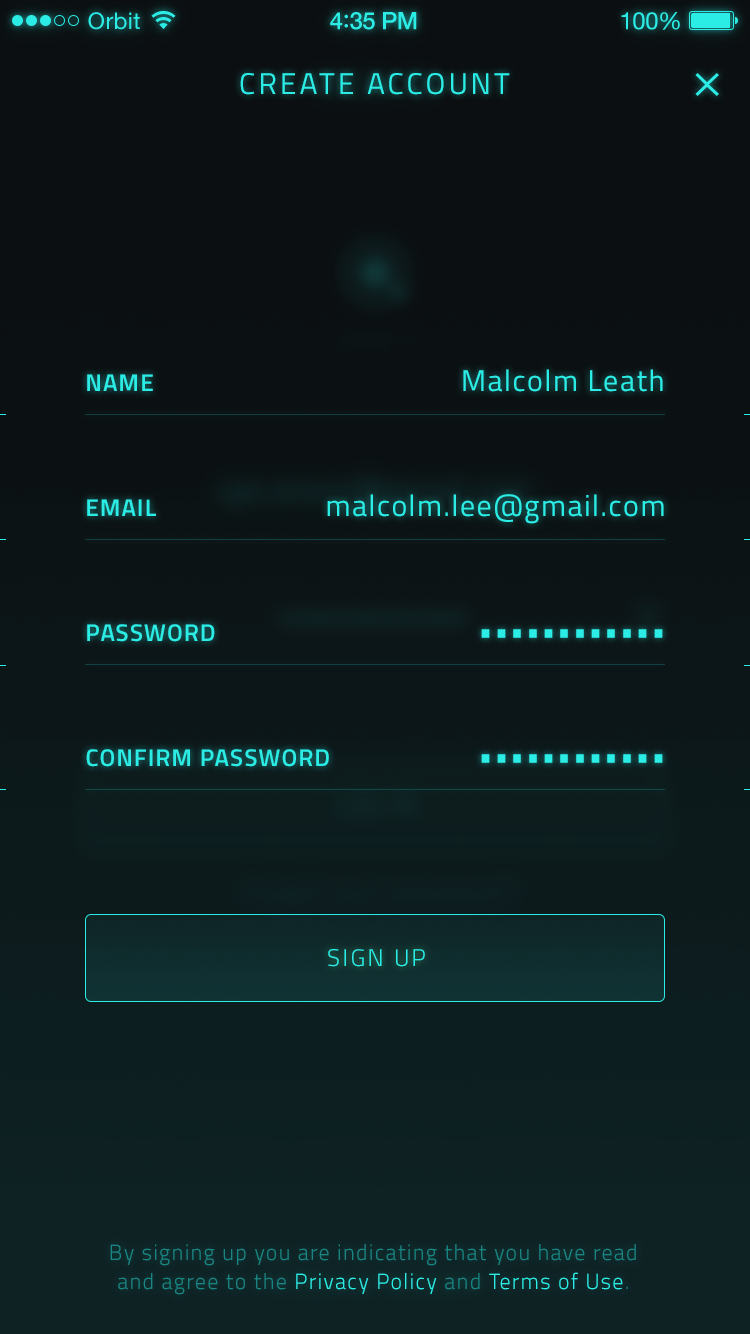
<style>
.page{position:relative;width:750px;height:1334px;background:#0b0f11}
.page>*{position:absolute;margin:0}
.t1{font:23px "HelveticaNeue";letter-spacing:0.02em;color:#2bede6}
.t2{font:24px "HelveticaNeue-Medium";letter-spacing:-0.02em;color:#2bede6}
.t3{font:26px "Avenir-Medium";letter-spacing:-0.02em;color:#2bede6}
.t4{font:24px "HelveticaNeue";letter-spacing:-0.02em;color:#2bede6}
.t5{font:30px "Titillium-Regular";letter-spacing:0.1em;color:#2bede6;text-transform:uppercase}
.t6{font:24px "Titillium-Semibold";letter-spacing:0.05em;color:#2bede6;text-transform:uppercase}
.t7{font:30px "Titillium-Regular";letter-spacing:0.05em;color:#2bede6}
.t8{font:24px "Titillium-Light";letter-spacing:0.1em;color:#2bede6;text-transform:uppercase}
.t9{font:22px/29px "Titillium-Light";letter-spacing:0.06em;color:#1a8683}
.t10{font:22px/29px "Titillium-Light";letter-spacing:0.06em;color:#2bede6}
</style>
<div class="page">
<p class="t1" style="left:88px;top:12px;width:52px;height:18px">Orbit</p>
<p class="t2" style="left:330px;top:12px;width:87px;height:18px">4<span class="t3">:</span>35 PM</p>
<p class="t4" style="left:621px;top:12px;width:59px;height:18px">100%</p>
<p class="t5" style="left:240px;top:73px;width:270px;height:22px">CREATE ACCOUNT</p>
<p class="t6" style="left:87px;top:374px;width:66px;height:17px">Name</p>
<p class="t7" style="left:463px;top:369px;width:200px;height:23px">Malcolm Leath</p>
<p class="t7" style="left:327px;top:494px;width:337px;height:30px">malcolm.lee@gmail.com</p>
<p class="t6" style="left:87px;top:499px;width:69px;height:17px">Email</p>
<p class="t6" style="left:87px;top:624px;width:128px;height:18px">Password</p>
<p class="t7" style="left:481px;top:629px;width:182px;height:9px">••••••••••••</p>
<p class="t6" style="left:86px;top:749px;width:243px;height:18px">Confirm Password</p>
<p class="t7" style="left:481px;top:754px;width:182px;height:9px">••••••••••••</p>
<p class="t8" style="left:328px;top:949px;width:97px;height:18px">Sign Up</p>
<p class="t9" style="left:110px;top:1244px;width:526px;height:51px;text-align:center">By signing up you are indicating that you have read<br>and agree to the <span class="t10">Privacy Policy</span> and <span class="t10">Terms of Use</span>.</p>
</div>
